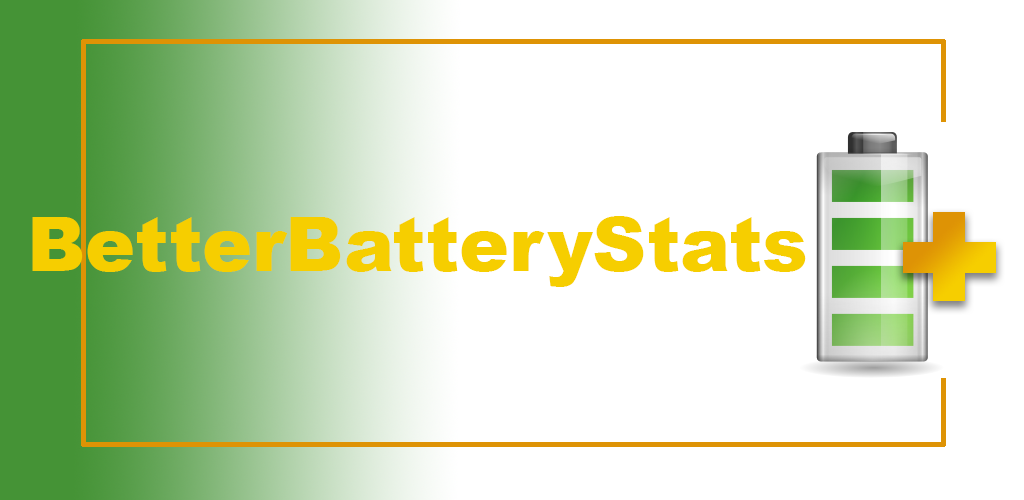
<style>
.page{position:relative;width:1024px;height:500px;background:#ffffff}
.page>*{position:absolute;margin:0}
.t1{font:75px "Arial-Black";color:#f6ce00}
</style>
<div class="page">
<p class="t1" style="left:32px;top:216px;width:774px;height:71px">BetterBatteryStats</p>
</div>
